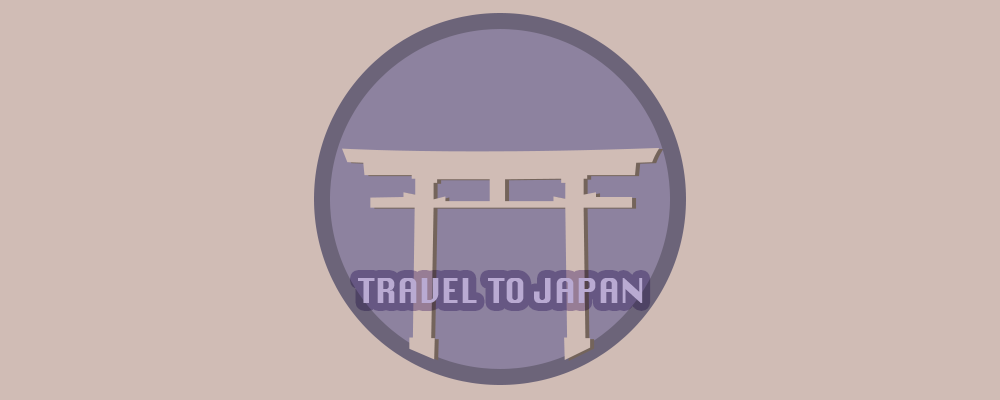
<style>
.page{position:relative;width:1000px;height:400px;background:#d0bcb5}
.page>*{position:absolute;margin:0}
.t1{font:33.1px "Silom";color:#b9aad2}
</style>
<div class="page">
<p class="t1" style="left:358px;top:278px;width:285px;height:25px">TRAVEL TO JAPAN</p>
</div>
